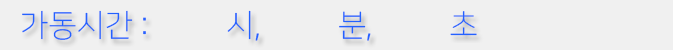
<style>
.page{position:relative;width:673px;height:50px;background:#f0f0f0}
.page>*{position:absolute;margin:0}
.t1{font:31px "NanumSquareL";color:#2462ff}
</style>
<div class="page">
<p class="t1" style="left:22px;top:10px;width:455px;height:31px">가동시간 :          시,          분,          초</p>
</div>
